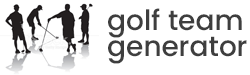
<style>
.page{position:relative;width:250px;height:75px;background:#ffffff}
.page>*{position:absolute;margin:0}
.t1{font:28px/26px "Poppins-Medium";color:#3e3e3e}
</style>
<div class="page">
<p class="t1" style="left:108px;top:8px;width:139px;height:56px">golf team<br>generator</p>
</div>
